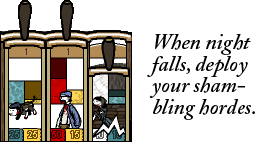
<style>
.page{position:relative;width:255px;height:142px;background:#ffffff}
.page>*{position:absolute;margin:0}
.t1{font:21.5px/21.5px "ACaslonPro-SemiboldItalic";color:#000000}
</style>
<div class="page">
<p class="t1" style="left:147px;top:34px;width:108px;height:86px">When night falls, deploy your shambling hordes.</p>
</div>
